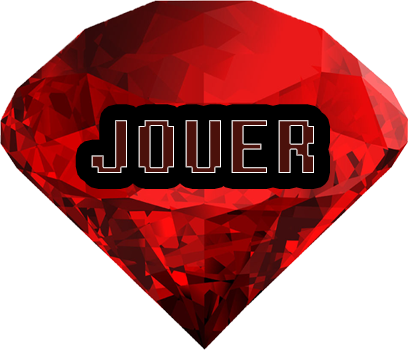
<style>
.page{position:relative;width:408px;height:350px;background:#ffffff}
.page>*{position:absolute;margin:0}
.t1{font:75px "Fixedsys";color:#4b110b;text-transform:uppercase}
</style>
<div class="page">
<p class="t1" style="left:91px;top:120px;width:223px;height:53px">JOUER</p>
</div>
